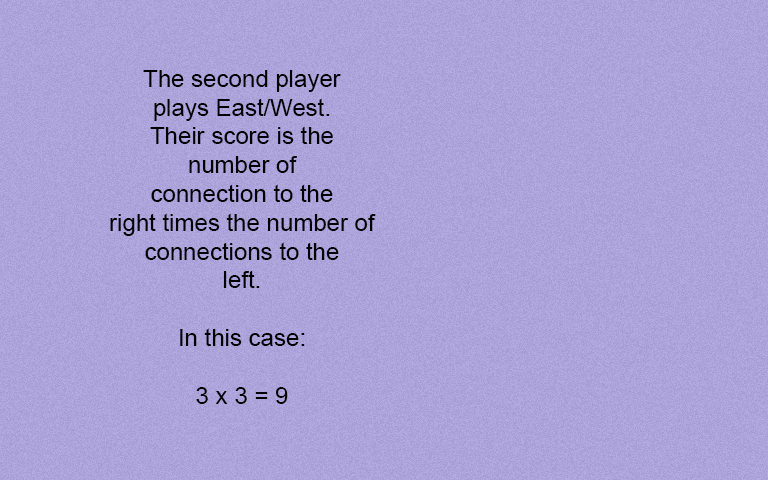
<style>
.page{position:relative;width:768px;height:480px}
.page>*{position:absolute;margin:0}
.t1{font:24px "ArialMT";color:#000000}
</style>
<div class="page">
<p class="t1" style="left:110px;top:70px;width:266px;height:334px;text-align:center">The second player<br>plays East/West.<br>Their score is the<br>number of<br>connection to the<br>right times the number of<br>connections to the<br>left.<br><br>In this case:<br><br>3 x 3 = 9</p>
</div>
